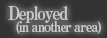
<style>
.page{position:relative;width:107px;height:38px;background:#333333}
.page>*{position:absolute;margin:0}
.t1{font:14px/12px "RyuminPro-ExBold";letter-spacing:-0.08em;color:#c9c9c9;scale:0.9 1}
.t2{font:18px/12px "RyuminPro-ExBold";letter-spacing:-0.08em;color:#c9c9c9;scale:0.9 1}
</style>
<div class="page">
<p class="t1" style="left:8px;top:6px;width:93px;height:28px"><span class="t2">Deployed<br>  </span>(in another area)</p>
</div>
